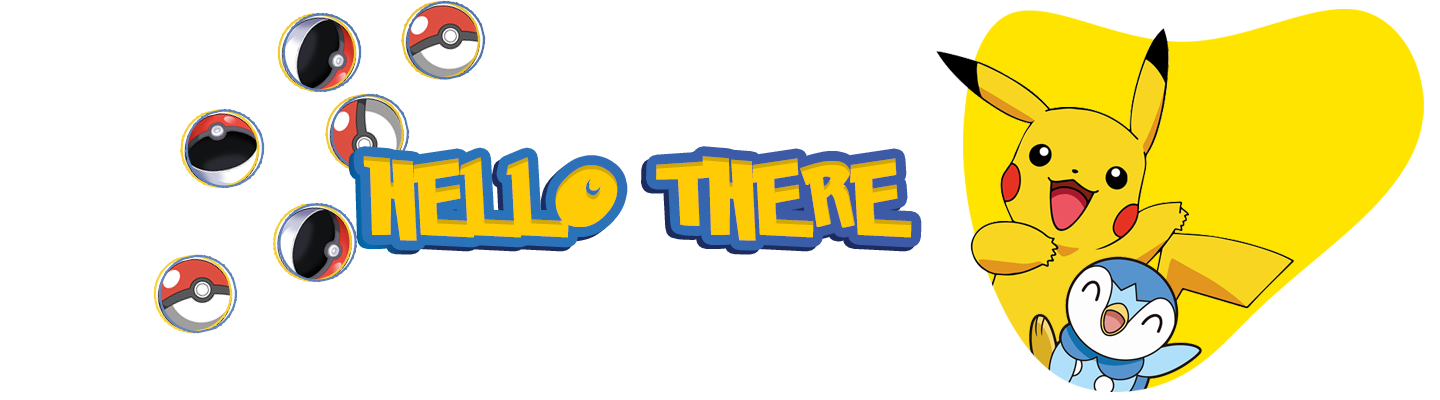
<style>
.page{position:relative;width:1440px;height:400px;background:#ffffff}
.page>*{position:absolute;margin:0}
.t1{font:72px "PokemonSolidNormal";letter-spacing:0.075em;color:#ffcb05;font-weight:bold}
</style>
<div class="page">
<p class="t1" style="left:358px;top:160px;width:549px;height:85px">HELLO THERE</p>
<p class="t1" style="left:363px;top:156px;width:549px;height:85px">HELLO THERE</p>
</div>
